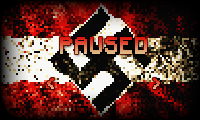
<style>
.page{position:relative;width:200px;height:120px}
.page>*{position:absolute;margin:0}
.t1{font:18px "Minecraftia-Regular";font-weight:bold}
.t2{font:12px "Minecraftia-Regular";font-weight:bold}
</style>
<div class="page">
<p class="t1" style="left:60px;top:37px;width:87px;height:17px">PAUSED</p>
<p class="t2" style="left:47px;top:78px;width:7px;height:11px">&lt;</p>
<p class="t2" style="left:153px;top:78px;width:7px;height:11px">&gt;</p>
</div>
